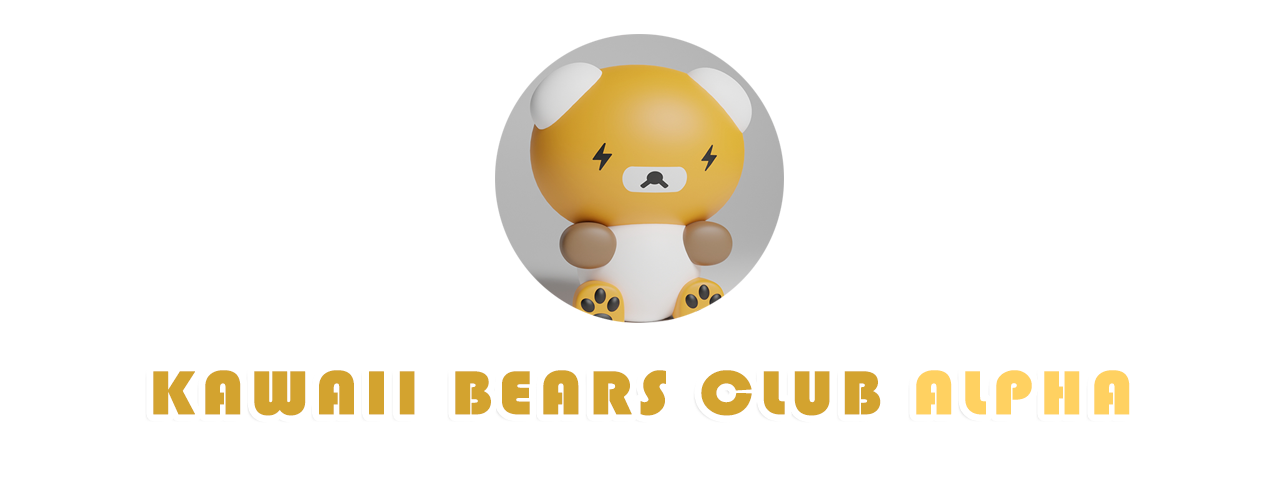
<style>
.page{position:relative;width:1279px;height:504px;background:#ffffff}
.page>*{position:absolute;margin:0}
.t1{font:63.7px "Bauhaus93";letter-spacing:0.075em;color:#d3a32f;text-transform:uppercase;font-weight:bold;scale:1.11 1}
.t2{font:63.7px "Bauhaus93";letter-spacing:0.075em;color:#ffd161;text-transform:uppercase;font-weight:bold;scale:1.11 1}
</style>
<div class="page">
<p class="t1" style="left:153px;top:370px;width:977px;height:46px">Kawaii Bears Club <span class="t2">Alpha</span></p>
</div>
